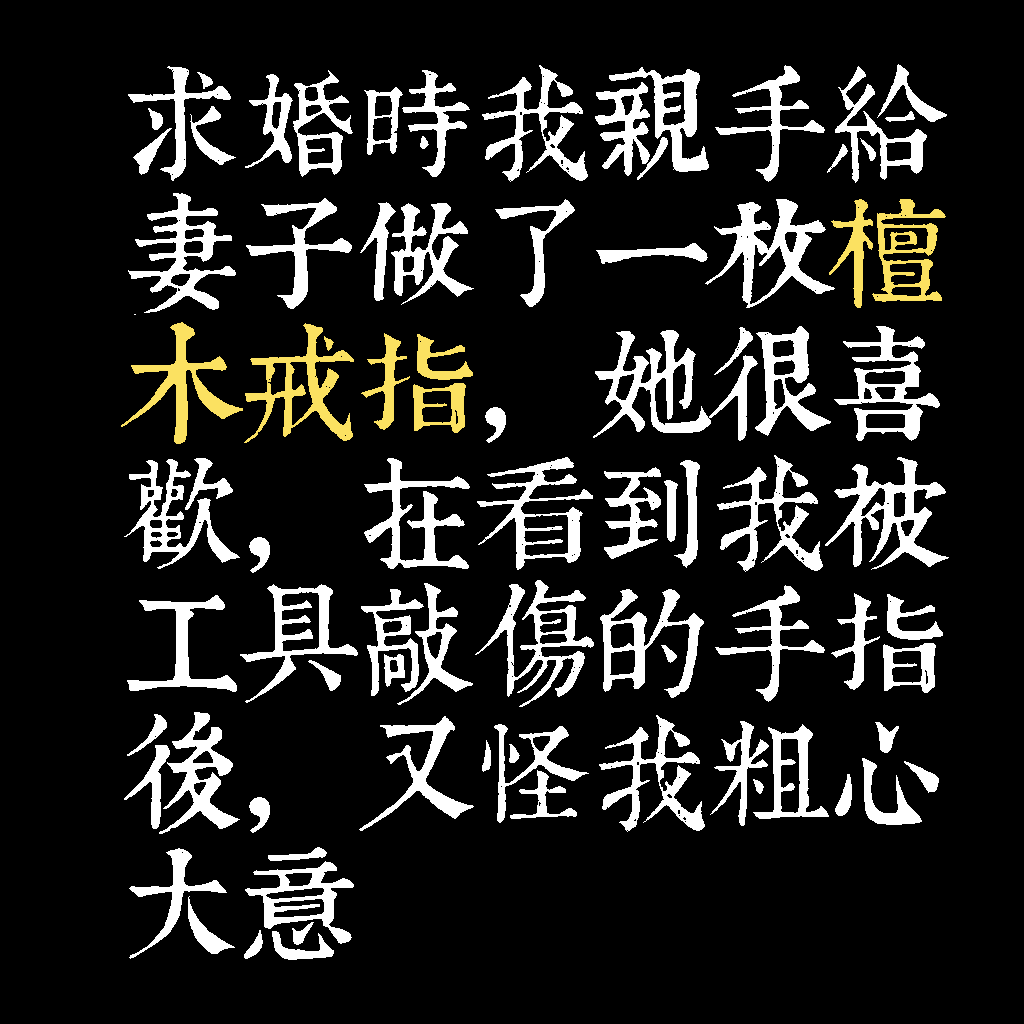
<style>
.page{position:relative;width:1024px;height:1024px;background:#000000}
.page>*{position:absolute;margin:0}
.t1{font:120px/130px "TpldKhangXiDictTrial";letter-spacing:-0.02em;color:#ffffff}
.t2{font:120px/130px "TpldKhangXiDictTrial";letter-spacing:-0.02em;color:#fbe161}
</style>
<div class="page">
<p class="t1" style="left:121px;top:64px;width:828px;height:896px">求婚時我親手給<br>妻子做了一枚<span class="t2">檀<br>木戒指</span>，她很喜<br>歡，在看到我被<br>工具敲傷的手指<br>後，又怪我粗心<br>大意</p>
</div>
